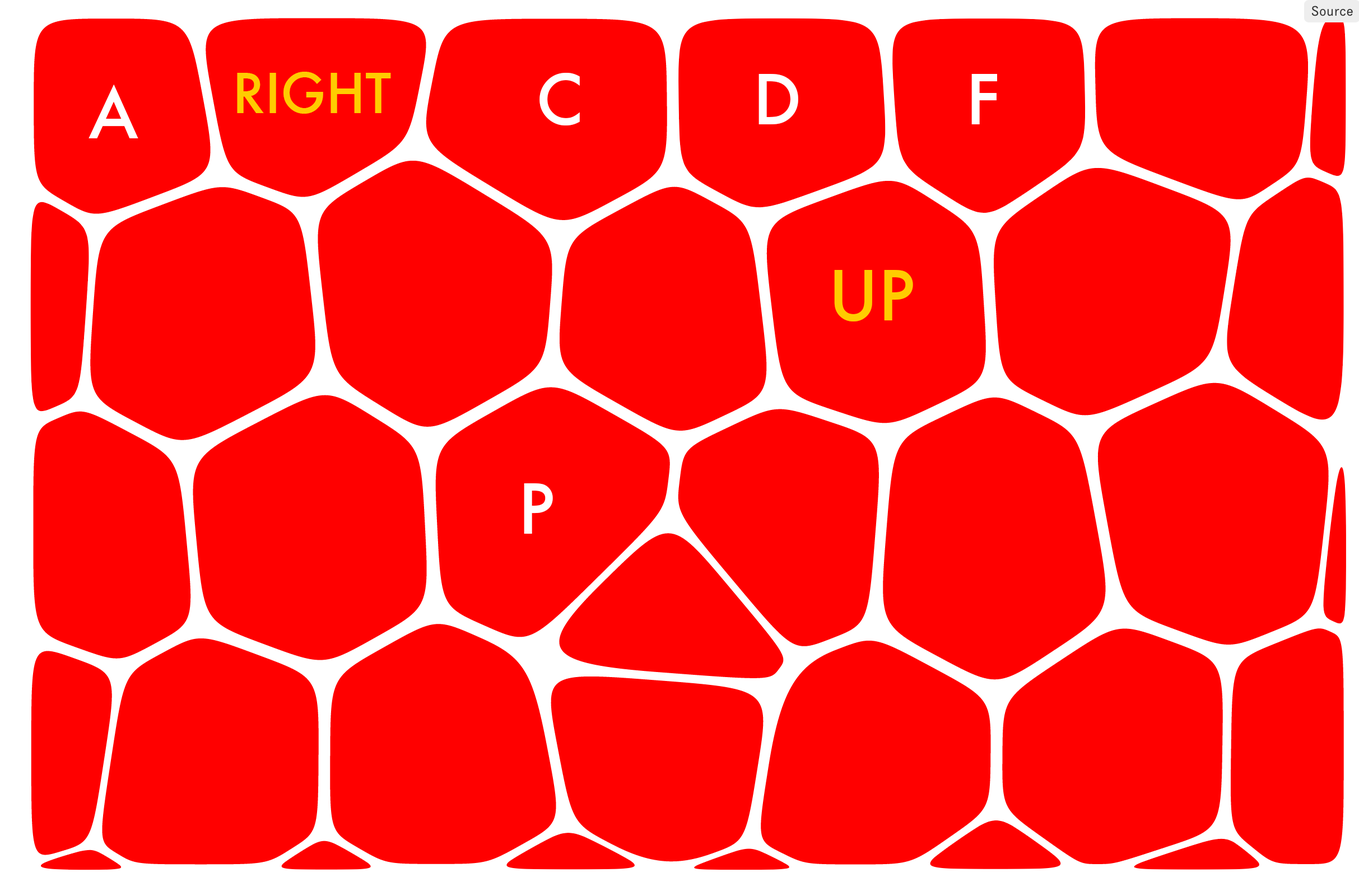
<style>
.page{position:relative;width:1359px;height:877px;background:#ff0000}
.page>*{position:absolute;margin:0}
.t1{font:53.8px "Futura-Medium";color:#ffcc00}
.t2{font:67.2px "Futura-Medium";color:#ffffff}
.t3{font:67.2px "Futura-Medium";color:#ffcc00}
</style>
<div class="page">
<p class="t1" style="left:237px;top:72px;width:154px;height:42px">RIGHT</p>
<p class="t2" style="left:540px;top:73px;width:40px;height:52px">C</p>
<p class="t2" style="left:759px;top:74px;width:39px;height:50px">D</p>
<p class="t2" style="left:971px;top:74px;width:26px;height:50px">F</p>
<p class="t2" style="left:89px;top:85px;width:49px;height:53px">A</p>
<p class="t3" style="left:834px;top:270px;width:79px;height:52px">UP</p>
<p class="t2" style="left:524px;top:483px;width:29px;height:51px">P</p>
</div>
